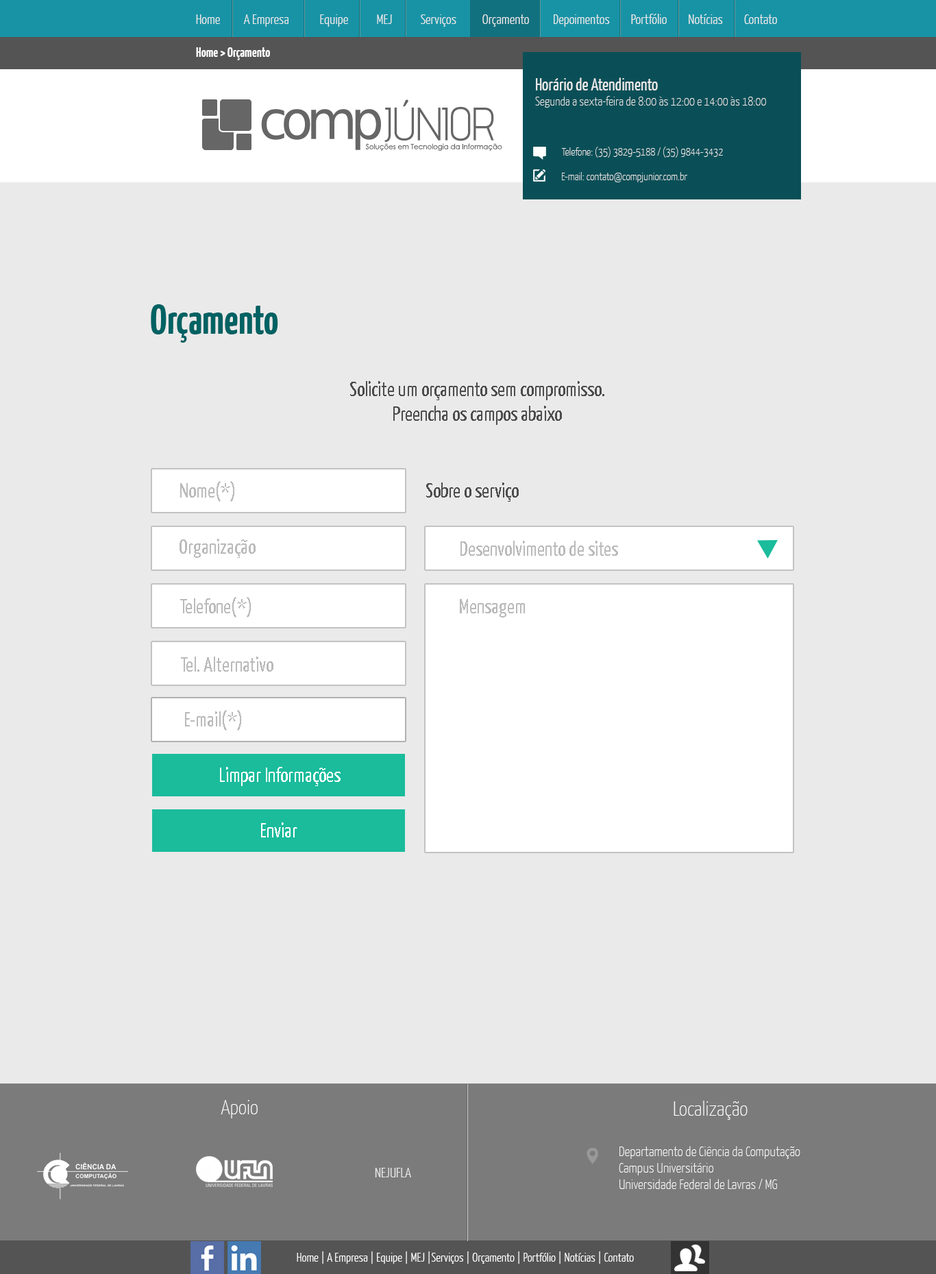
<style>
.page{position:relative;width:936px;height:1274px;background:#eaeaea}
.page>*{position:absolute;margin:0}
.t1{font:13.7px "YanoneKaffeesatz-Light";color:#eaeaea}
.t2{font:17.1px "YanoneKaffeesatz-Light";color:#999999}
.t3{font:13.7px "YanoneKaffeesatz-Bold";color:#fffdfd}
.t4{font:12.3px "YanoneKaffeesatz-ExtraLight";color:#eaeaea}
.t5{font:17.1px "YanoneKaffeesatz-Regular";color:#eaeaea}
.t6{font:11px "YanoneKaffeesatz-ExtraLight";color:#eaeaea}
.t7{font:13.7px "YanoneKaffeesatz-ExtraLight";color:#eaeaea}
.t8{font:41.1px "YanoneKaffeesatz-Bold";color:#006263}
.t9{font:20.6px "YanoneKaffeesatz-Regular";color:#4d4d4d}
.t10{font:20.6px "YanoneKaffeesatz-Regular";color:#bababa}
.t11{font:20.6px "YanoneKaffeesatz-Regular";color:#ffffff}
.t12{font:20.6px "YanoneKaffeesatz-Regular";color:#fffefe}
.t13{font:20.6px "YanoneKaffeesatz-ExtraLight";color:#ffffff}
.t14{font:20.6px "YanoneKaffeesatz-ExtraLight";color:#fefefe}
.t15{font:13.7px "YanoneKaffeesatz-ExtraLight";color:#ffffff}
.t16{font:12.3px "YanoneKaffeesatz-Light";color:#ffffff}
</style>
<div class="page">
<p class="t1" style="left:196px;top:14px;width:581px;height:13px"><span class="t2"> </span>Home          A Empresa             Equipe            MEJ            Serviços           Orçamento          Depoimentos         Portfólio         Notícias         Contato</p>
<p class="t3" style="left:196px;top:47px;width:74px;height:13px">Home &gt; Orçamento</p>
<p class="t4" style="left:535px;top:77px;width:231px;height:31px"><span class="t5">Horário de Atendimento<br></span>Segunda a sexta-feira de 8:00 às 12:00 e 14:00 às 18:00</p>
<p class="t6" style="left:561px;top:147px;width:162px;height:11px"><span class="t7"><br></span>Telefone: (35) 3829-5188 / (35) 9844-3432</p>
<p class="t6" style="left:562px;top:172px;width:125px;height:10px"><span class="t7"><br></span>E-mail: contato@compjunior.com.br</p>
<p class="t8" style="left:151px;top:304px;width:127px;height:39px">Orçamento</p>
<p class="t9" style="left:350px;top:381px;width:254px;height:44px;text-align:center">Solicite um orçamento sem compromisso.<br>Preencha os campos abaixo</p>
<p class="t10" style="left:180px;top:481px;width:54px;height:21px">Nome(*)</p>
<p class="t9" style="left:426px;top:482px;width:93px;height:20px">Sobre o serviço</p>
<p class="t10" style="left:180px;top:539px;width:76px;height:19px">Organização</p>
<p class="t10" style="left:460px;top:541px;width:158px;height:15px">Desenvolvimento de sites</p>
<p class="t10" style="left:180px;top:597px;width:71px;height:20px">Telefone(*)</p>
<p class="t10" style="left:460px;top:599px;width:65px;height:18px">Mensagem</p>
<p class="t10" style="left:181px;top:656px;width:92px;height:16px">Tel. Alternativo</p>
<p class="t10" style="left:185px;top:710px;width:56px;height:20px">E-mail(*)</p>
<p class="t11" style="left:220px;top:767px;width:121px;height:19px">Limpar Informações</p>
<p class="t12" style="left:261px;top:822px;width:36px;height:15px">Enviar</p>
<p class="t13" style="left:221px;top:1100px;width:37px;height:18px">Apoio</p>
<p class="t14" style="left:674px;top:1101px;width:74px;height:19px">Localização</p>
<p class="t15" style="left:619px;top:1146px;width:181px;height:43px">Departamento de Ciência da Computação<br>Campus Universitário<br>Universidade Federal de Lavras / MG</p>
<p class="t1" style="left:375px;top:1168px;width:36px;height:9px">NEJUFLA</p>
<p class="t16" style="left:297px;top:1251px;width:337px;height:13px"><span class="t2"> </span>Home | A Empresa | Equipe | MEJ |Serviços | Orçamento | Portfólio | Notícias | Contato</p>
</div>
